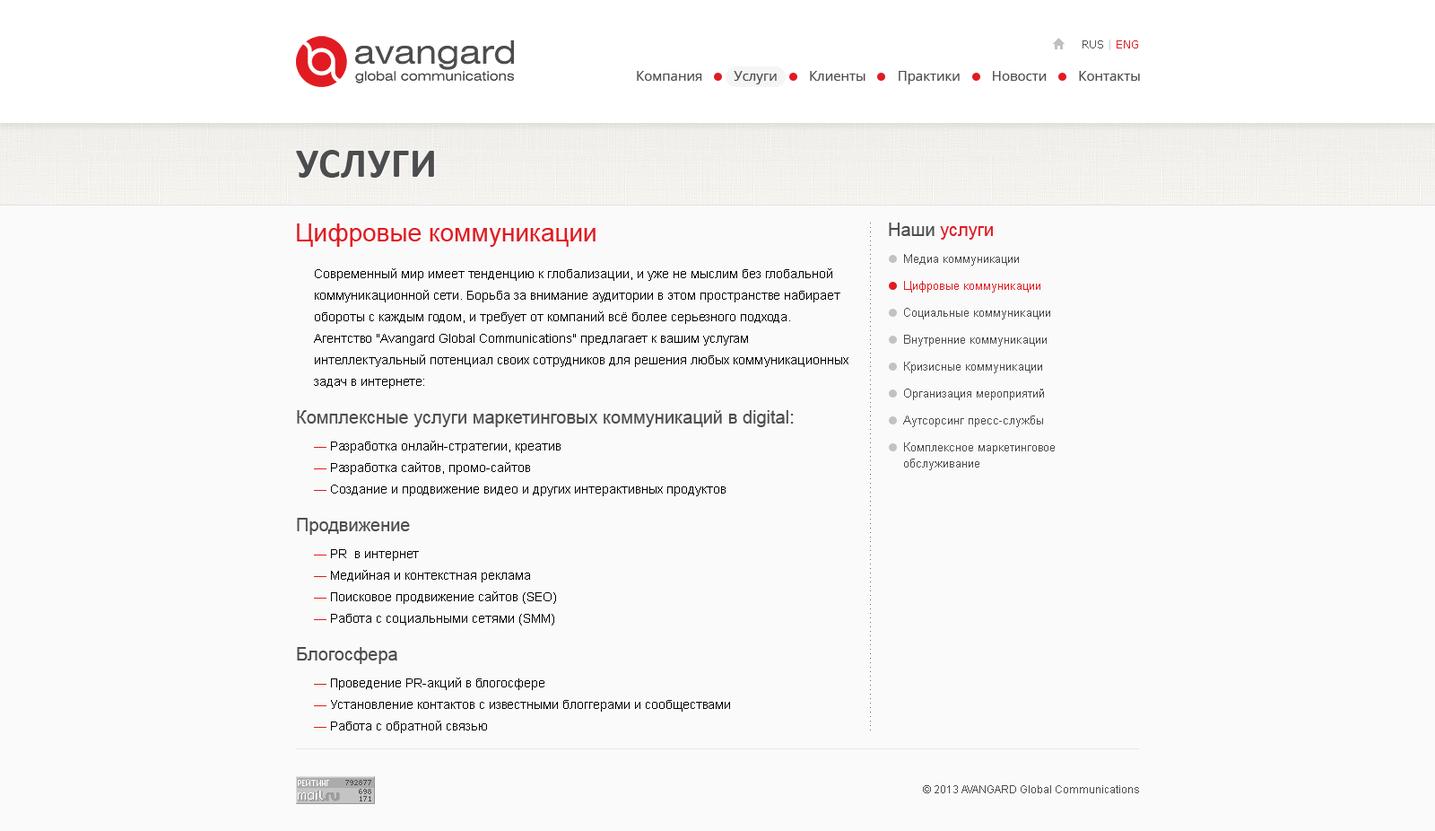
<style>
.page{position:relative;width:1435px;height:831px;background:#fafafa}
.page>*{position:absolute;margin:0}
.t1{font:10.8px "Verdana";color:#555555}
.t2{font:10.8px "Verdana";color:#d1d1d1}
.t3{font:10.8px "Verdana";color:#e11b22}
.t4{font:13.5px "OpenSans";color:#4c4d4f}
.t5{font:41.3px "Calibri-Bold";letter-spacing:0.02em;color:#4c4d4f;text-transform:uppercase}
.t6{font:25.1px "ArialMT";color:#e11b22}
.t7{font:17.9px "ArialMT";color:#e11b22}
.t8{font:17.9px "ArialMT";color:#4c4d4f}
.t9{font:11.7px/26.9px "ArialMT";color:#4c4d4f}
.t10{font:11.7px/26.9px "ArialMT";color:#e11b22}
.t11{font:11.7px/16.1px "ArialMT";color:#4c4d4f}
.t12{font:12.6px/21.5px "ArialMT";color:#000000}
.t13{font:12.6px/21.5px "ArialMT";color:#e11b22}
.t14{font:10.8px "ArialMT";color:#4c4d4f}
</style>
<div class="page">
<p class="t1" style="left:1083px;top:39px;width:55px;height:11px">RUS<span class="t2"> | </span><span class="t3">ENG</span></p>
<p class="t4" style="left:637px;top:71px;width:503px;height:13px">Компания         Услуги         Клиенты         Практики         Новости         Контакты</p>
<p class="t5" style="left:296px;top:150px;width:138px;height:28px">услуги</p>
<p class="t6" style="left:297px;top:223px;width:299px;height:24px">Цифровые коммуникации</p>
<p class="t7" style="left:889px;top:222px;width:104px;height:18px"><span class="t8">Наши </span>услуги</p>
<p class="t9" style="left:903px;top:254px;width:152px;height:216px">Медиа коммуникации<br><span class="t10">Цифровые коммуникации<br></span>Социальные коммуникации<br>Внутренние коммуникации<br>Кризисные коммуникации<br>Организация мероприятий<br>Аутсорсинг пресс-службы<br>Комплексное маркетинговое <br><span class="t11">обслуживание</span></p>
<p class="t12" style="left:314px;top:268px;width:535px;height:465px">Современный мир имеет тенденцию к глобализации, и уже не мыслим без глобальной коммуникационной сети. Борьба за внимание аудитории в этом пространстве набирает обороты с каждым годом, и требует от компаний всё более серьезного подхода. Агентство "Avangard Global Communications" предлагает к вашим услугам интеллектуальный потенциал своих сотрудников для решения любых коммуникационных задач в интернете:<br><br><br><span class="t13">— </span>Разработка онлайн-стратегии, креатив <br><span class="t13">— </span>Разработка сайтов, промо-сайтов<br><span class="t13">— </span>Создание и продвижение видео и других интерактивных продуктов<br><br><br><span class="t13">— </span>PR  в интернет <br><span class="t13">— </span>Медийная и контекстная реклама<br><span class="t13">— </span>Поисковое продвижение сайтов (SEO)<br><span class="t13">— </span>Работа с социальными сетями (SMM)<br><br><br><span class="t13">— </span>Проведение PR-акций в блогосфере <br><span class="t13">— </span>Установление контактов с известными блоггерами и сообществами<br><span class="t13">— </span>Работа с обратной связью</p>
<p class="t8" style="left:297px;top:410px;width:497px;height:17px">Комплексные услуги маркетинговых коммуникаций в digital:</p>
<p class="t8" style="left:297px;top:518px;width:113px;height:17px">Продвижение</p>
<p class="t8" style="left:297px;top:647px;width:100px;height:17px">Блогосфера</p>
<p class="t14" style="left:923px;top:785px;width:216px;height:8px">© 2013 AVANGARD Global Communications</p>
</div>
